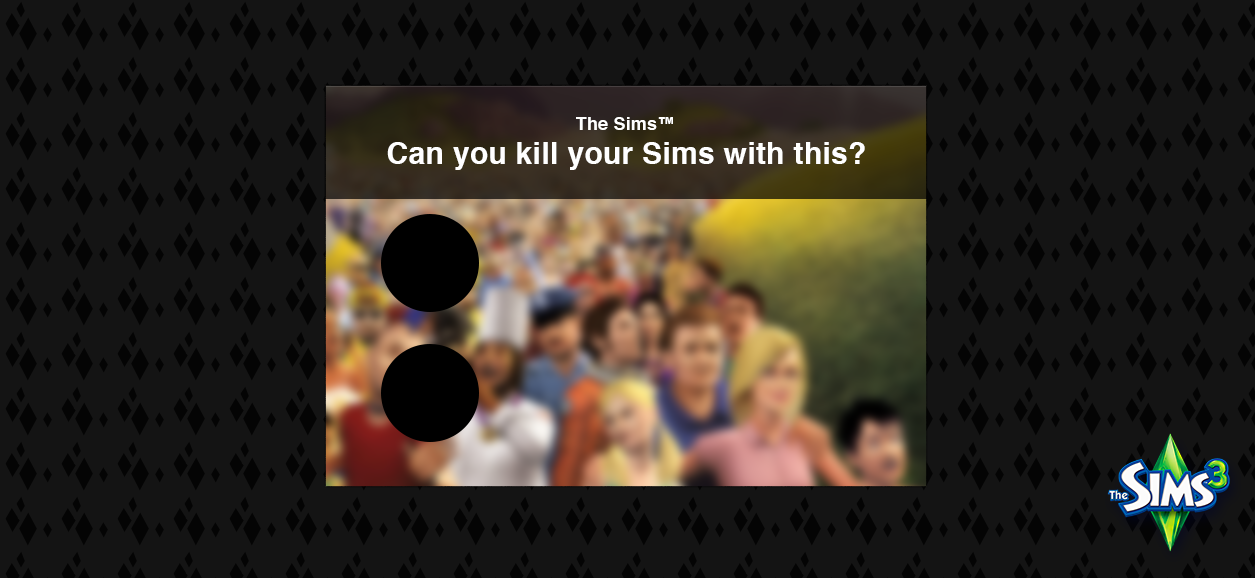
<style>
.page{position:relative;width:1255px;height:578px;background:#141414}
.page>*{position:absolute;margin:0}
.t1{font:18px "Helvetica-Bold";letter-spacing:0.01em;color:#ffffff}
.t2{font:30px "Helvetica-Bold";letter-spacing:0.01em;color:#ffffff}
</style>
<div class="page">
<p class="t1" style="left:576px;top:117px;width:97px;height:13px">The Sims™</p>
<p class="t2" style="left:387px;top:142px;width:478px;height:28px">Can you kill your Sims with this?</p>
</div>
